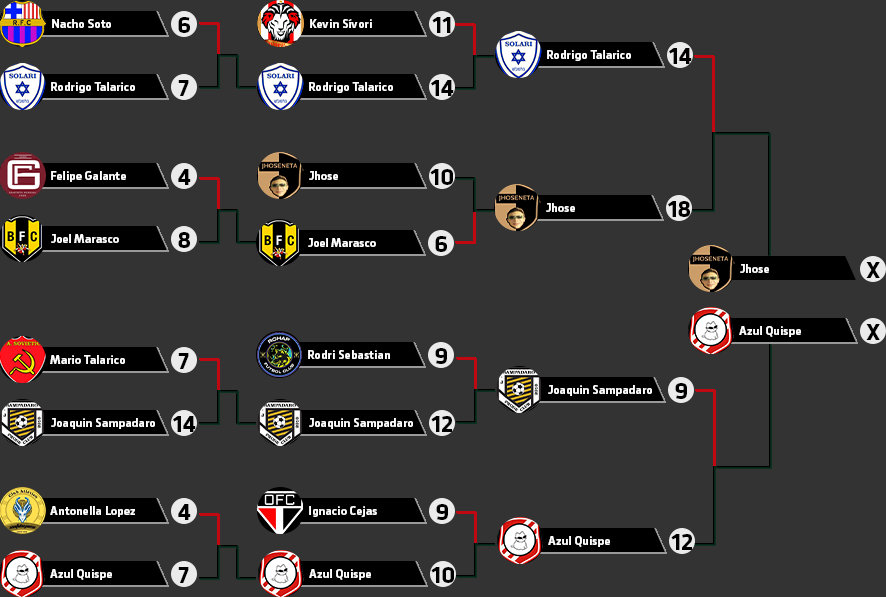
<style>
.page{position:relative;width:886px;height:597px;background:#333333}
.page>*{position:absolute;margin:0}
.t1{font:22.9px "Urfa-Bold";color:#000000}
.t2{font:12px "Urfa-Bold";color:#ffffff}
</style>
<div class="page">
<p class="t1" style="left:178px;top:17px;width:12px;height:16px">6</p>
<p class="t1" style="left:432px;top:17px;width:19px;height:16px">11</p>
<p class="t2" style="left:52px;top:19px;width:59px;height:9px">Nacho Soto</p>
<p class="t2" style="left:310px;top:19px;width:62px;height:9px">Kevin Sívori</p>
<p class="t2" style="left:547px;top:50px;width:84px;height:11px">Rodrigo Talarico</p>
<p class="t1" style="left:669px;top:48px;width:23px;height:16px">14</p>
<p class="t2" style="left:51px;top:82px;width:84px;height:11px">Rodrigo Talarico</p>
<p class="t1" style="left:178px;top:80px;width:11px;height:16px">7</p>
<p class="t2" style="left:309px;top:82px;width:84px;height:11px">Rodrigo Talarico</p>
<p class="t1" style="left:431px;top:80px;width:23px;height:16px">14</p>
<p class="t2" style="left:51px;top:171px;width:75px;height:11px">Felipe Galante</p>
<p class="t1" style="left:178px;top:169px;width:13px;height:16px">4</p>
<p class="t2" style="left:309px;top:171px;width:29px;height:9px">Jhose</p>
<p class="t1" style="left:430px;top:169px;width:23px;height:16px">10</p>
<p class="t2" style="left:546px;top:203px;width:29px;height:9px">Jhose</p>
<p class="t1" style="left:668px;top:201px;width:22px;height:16px">18</p>
<p class="t1" style="left:178px;top:232px;width:12px;height:16px">8</p>
<p class="t2" style="left:51px;top:234px;width:68px;height:9px">Joel Marasco</p>
<p class="t2" style="left:308px;top:238px;width:68px;height:9px">Joel Marasco</p>
<p class="t1" style="left:435px;top:236px;width:12px;height:16px">6</p>
<p class="t2" style="left:740px;top:264px;width:29px;height:9px">Jhose</p>
<p class="t1" style="left:866px;top:262px;width:14px;height:16px">X</p>
<p class="t2" style="left:739px;top:326px;width:62px;height:11px">Azul Quispe</p>
<p class="t1" style="left:866px;top:324px;width:14px;height:16px">X</p>
<p class="t1" style="left:178px;top:353px;width:11px;height:16px">7</p>
<p class="t2" style="left:308px;top:350px;width:82px;height:9px">Rodri Sebastian</p>
<p class="t1" style="left:435px;top:348px;width:12px;height:16px">9</p>
<p class="t2" style="left:50px;top:355px;width:75px;height:9px">Mario Talarico</p>
<p class="t2" style="left:548px;top:385px;width:104px;height:11px">Joaquin Sampadaro</p>
<p class="t1" style="left:675px;top:383px;width:12px;height:16px">9</p>
<p class="t2" style="left:51px;top:418px;width:104px;height:11px">Joaquin Sampadaro</p>
<p class="t1" style="left:173px;top:416px;width:23px;height:16px">14</p>
<p class="t2" style="left:309px;top:418px;width:104px;height:11px">Joaquin Sampadaro</p>
<p class="t1" style="left:431px;top:416px;width:21px;height:16px">12</p>
<p class="t2" style="left:50px;top:506px;width:85px;height:11px">Antonella Lopez</p>
<p class="t1" style="left:178px;top:504px;width:13px;height:16px">4</p>
<p class="t2" style="left:309px;top:506px;width:68px;height:11px">Ignacio Cejas</p>
<p class="t1" style="left:436px;top:504px;width:12px;height:16px">9</p>
<p class="t1" style="left:671px;top:534px;width:21px;height:16px">12</p>
<p class="t2" style="left:548px;top:536px;width:62px;height:11px">Azul Quispe</p>
<p class="t2" style="left:50px;top:569px;width:62px;height:11px">Azul Quispe</p>
<p class="t1" style="left:178px;top:567px;width:11px;height:16px">7</p>
<p class="t2" style="left:309px;top:569px;width:62px;height:11px">Azul Quispe</p>
<p class="t1" style="left:431px;top:567px;width:23px;height:16px">10</p>
</div>
